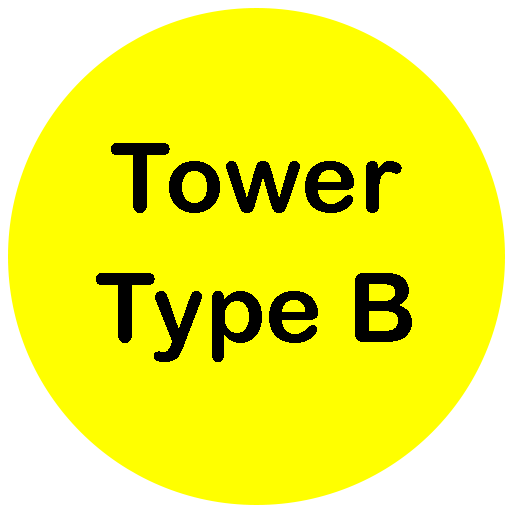
<style>
.page{position:relative;width:512px;height:512px;background:#ffff00}
.page>*{position:absolute;margin:0}
.t1{font:97.2px/65.1px "ArialRoundedMTBold";color:#000000}
</style>
<div class="page">
<p class="t1" style="left:96px;top:143px;width:316px;height:219px;text-align:center">Tower<br><br>Type B</p>
</div>
